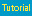
<style>
.page{position:relative;width:32px;height:16px;background:#009ac9}
.page>*{position:absolute;margin:0}
.t1{font:9px "Nunito-Regular";letter-spacing:-0.019em;color:#ffe63c}
</style>
<div class="page">
<p class="t1" style="left:2px;top:4px;width:28px;height:7px">Tutorial</p>
</div>
